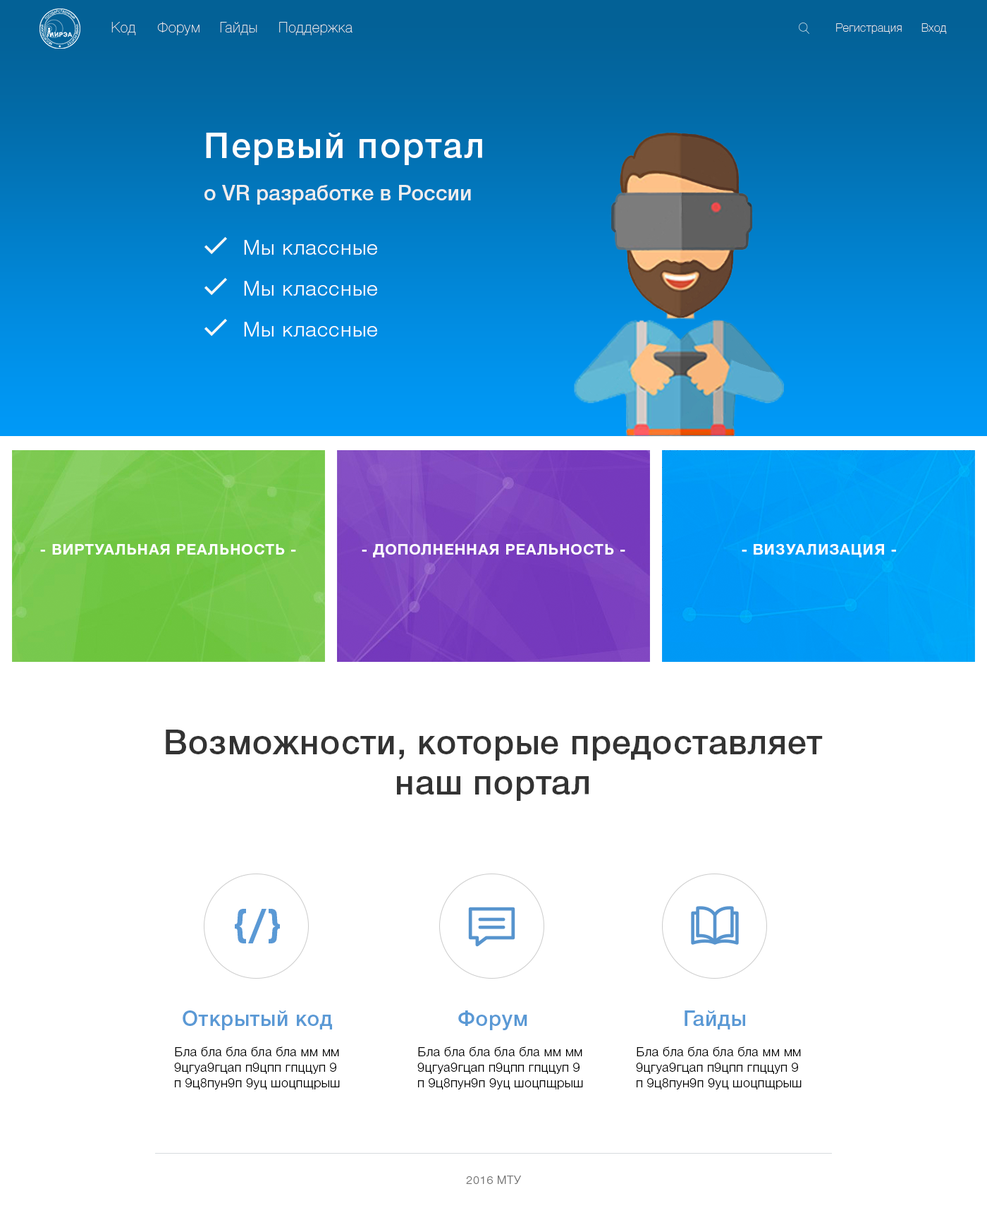
<style>
.page{position:relative;width:987px;height:1208px;background:#ffffff}
.page>*{position:absolute;margin:0}
.t1{font:14.1px "HelveticaNeueCyr-UltraLight";letter-spacing:0.05em;color:#eeeeee}
.t2{font:11.3px "HelveticaNeueCyr-UltraLight";letter-spacing:0.05em;color:#eeeeee}
.t3{font:21.2px/42.3px "HelveticaNeueCyr-Medium";color:#eeeeee}
.t4{font:35.3px/42.3px "HelveticaNeueCyr-Medium";letter-spacing:0.05em;color:#ffffff}
.t5{font:20.5px "HelveticaNeueCyr-Light";letter-spacing:0.05em;color:#ffffff}
.t6{font:14.8px "HelveticaNeueCyr-Bold";letter-spacing:0.05em;color:#ffffff}
.t7{font:33.9px "HelveticaNeueCyr-Medium";letter-spacing:0.025em;color:#333333}
.t8{font:49.4px "BebasNeueBold";letter-spacing:0.025em;color:#5a99d5}
.t9{font:21.2px "HelveticaNeueCyr-Medium";letter-spacing:0.025em;color:#5a99d5}
.t10{font:12.7px "HelveticaNeueCyr-Light";letter-spacing:0.025em;color:#000000}
.t11{font:11.3px "HelveticaNeueCyr-Light";letter-spacing:0.05em;color:#777777}
</style>
<div class="page">
<p class="t1" style="left:111px;top:22px;width:25px;height:13px">Код</p>
<p class="t1" style="left:157px;top:22px;width:43px;height:13px">Форум</p>
<p class="t1" style="left:220px;top:22px;width:37px;height:13px">Гайды</p>
<p class="t1" style="left:279px;top:22px;width:74px;height:13px">Поддержка</p>
<p class="t2" style="left:837px;top:23px;width:65px;height:11px">Регистрация</p>
<p class="t2" style="left:922px;top:23px;width:25px;height:11px">Вход</p>
<p class="t3" style="left:205px;top:133px;width:277px;height:72px"><span class="t4">Первый портал <br></span>о VR разработке в России</p>
<p class="t5" style="left:244px;top:240px;width:133px;height:15px">Мы классные</p>
<p class="t5" style="left:244px;top:281px;width:133px;height:15px">Мы классные</p>
<p class="t5" style="left:244px;top:322px;width:133px;height:14px">Мы классные</p>
<p class="t6" style="left:40px;top:544px;width:256px;height:11px">- ВИРТУАЛЬНАЯ РЕАЛЬНОСТЬ -</p>
<p class="t6" style="left:362px;top:544px;width:264px;height:13px">- ДОПОЛНЕННАЯ РЕАЛЬНОСТЬ -</p>
<p class="t6" style="left:742px;top:544px;width:154px;height:13px">- ВИЗУАЛИЗАЦИЯ -</p>
<p class="t7" style="left:166px;top:729px;width:657px;height:72px;text-align:center">Возможности, которые предоставляет <br>наш портал</p>
<p class="t8" style="left:235px;top:908px;width:45px;height:35px">{/}</p>
<p class="t9" style="left:183px;top:1010px;width:149px;height:20px">Открытый код</p>
<p class="t9" style="left:458px;top:1010px;width:70px;height:20px">Форум</p>
<p class="t9" style="left:685px;top:1010px;width:61px;height:19px">Гайды</p>
<p class="t10" style="left:174px;top:1046px;width:166px;height:43px">Бла бла бла бла бла мм мм9цгуа9гцап п9цпп гпццуп 9п 9ц8пун9п 9уц шоцпщрыш</p>
<p class="t10" style="left:418px;top:1046px;width:165px;height:43px">Бла бла бла бла бла мм мм9цгуа9гцап п9цпп гпццуп 9п 9ц8пун9п 9уц шоцпщрыш</p>
<p class="t10" style="left:636px;top:1046px;width:166px;height:43px">Бла бла бла бла бла мм мм9цгуа9гцап п9цпп гпццуп 9п 9ц8пун9п 9уц шоцпщрыш</p>
<p class="t11" style="left:466px;top:1175px;width:55px;height:9px">2016 МТУ</p>
</div>
